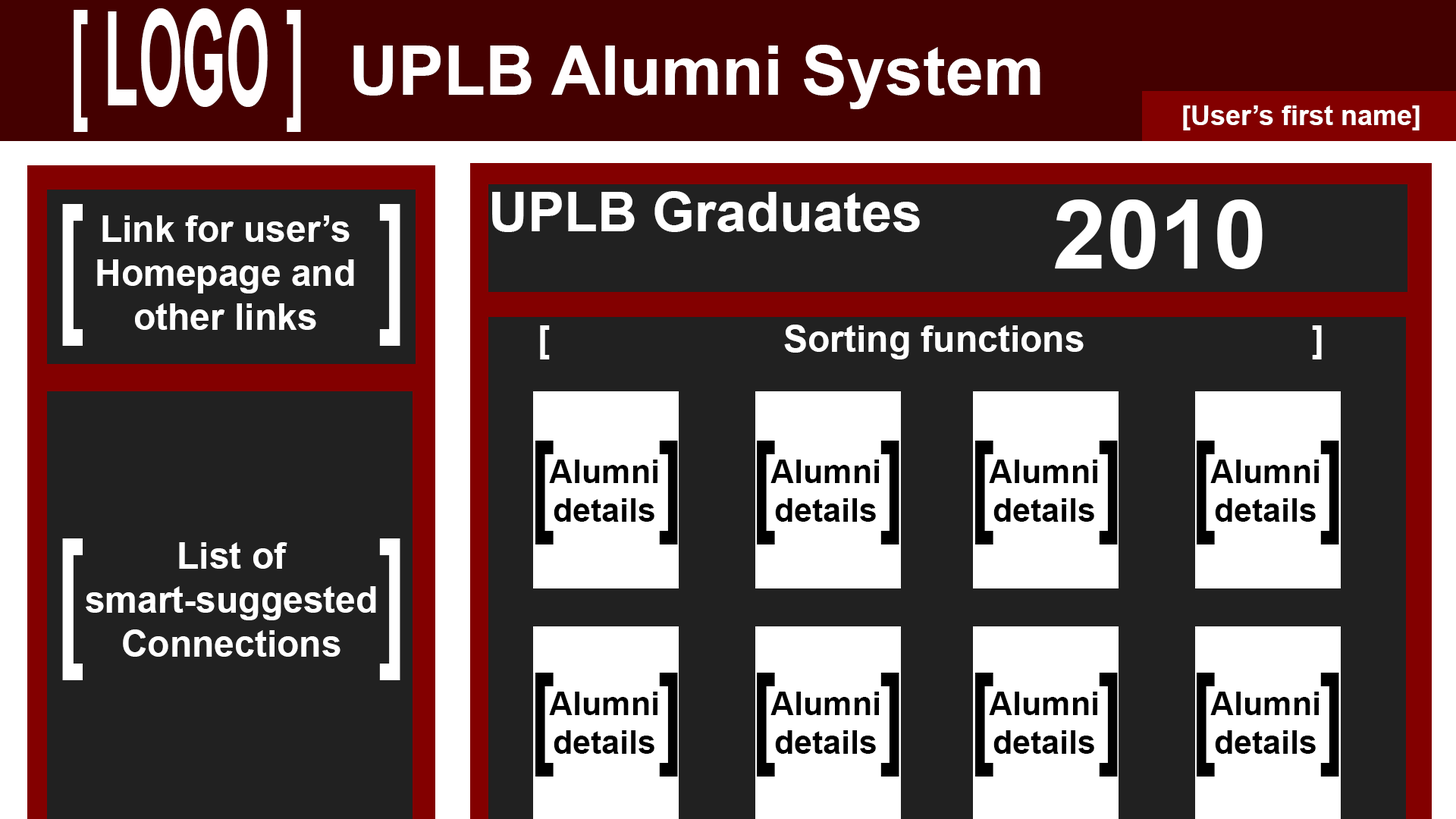
<style>
.page{position:relative;width:1456px;height:819px;background:#212121}
.page>*{position:absolute;margin:0}
.t1{font:132.9px "Arial-BoldMT";color:#fffefe;scale:0.42 1}
.t2{font:68.2px "Arial-BoldMT";color:#fffefe}
.t3{font:27.3px "Arial-BoldMT";color:#ffffff}
.t4{font:54.6px "Arial-BoldMT";color:#ffffff}
.t5{font:154.8px "Arial-BoldMT";color:#ffffff;scale:0.53 1}
.t6{font:96.3px "Arial-BoldMT";color:#ffffff}
.t7{font:36.4px "Arial-BoldMT";color:#ffffff}
.t8{font:112.8px "Arial-BoldMT";color:#000000;scale:0.66 1}
.t9{font:32.6px "Arial-BoldMT";color:#000000}
</style>
<div class="page">
<p class="t1" style="left:74px;top:8px;width:227px;height:124px">[ LOGO ]</p>
<p class="t2" style="left:353px;top:45px;width:687px;height:64px">UPLB Alumni System</p>
<p class="t3" style="left:1183px;top:105px;width:237px;height:25px">[User’s first name]</p>
<p class="t4" style="left:492px;top:191px;width:428px;height:41px">UPLB Graduates</p>
<p class="t5" style="left:62px;top:204px;width:338px;height:142px">[             ]</p>
<p class="t6" style="left:1055px;top:199px;width:208px;height:70px">2010</p>
<p class="t7" style="left:97px;top:215px;width:257px;height:115px;text-align:center">Link for user’s Homepage and other links</p>
<p class="t7" style="left:540px;top:325px;width:782px;height:34px">[         Sorting functions         ]</p>
<p class="t8" style="left:535px;top:441px;width:143px;height:103px">[     ]</p>
<p class="t8" style="left:757px;top:441px;width:142px;height:103px">[     ]</p>
<p class="t8" style="left:975px;top:441px;width:143px;height:103px">[     ]</p>
<p class="t8" style="left:1197px;top:441px;width:142px;height:103px">[     ]</p>
<p class="t9" style="left:549px;top:460px;width:108px;height:62px;text-align:center">Alumni details</p>
<p class="t9" style="left:770px;top:460px;width:109px;height:62px;text-align:center">Alumni details</p>
<p class="t9" style="left:989px;top:460px;width:108px;height:62px;text-align:center">Alumni details</p>
<p class="t9" style="left:1210px;top:460px;width:109px;height:62px;text-align:center">Alumni details</p>
<p class="t5" style="left:62px;top:538px;width:338px;height:142px">[             ]</p>
<p class="t7" style="left:86px;top:542px;width:290px;height:115px;text-align:center">List of<br>smart-suggested Connections</p>
<p class="t8" style="left:535px;top:673px;width:143px;height:104px">[     ]</p>
<p class="t8" style="left:757px;top:673px;width:142px;height:104px">[     ]</p>
<p class="t8" style="left:975px;top:673px;width:143px;height:104px">[     ]</p>
<p class="t8" style="left:1197px;top:673px;width:142px;height:104px">[     ]</p>
<p class="t9" style="left:549px;top:692px;width:108px;height:62px;text-align:center">Alumni details</p>
<p class="t9" style="left:770px;top:692px;width:109px;height:62px;text-align:center">Alumni details</p>
<p class="t9" style="left:989px;top:692px;width:108px;height:62px;text-align:center">Alumni details</p>
<p class="t9" style="left:1210px;top:692px;width:109px;height:62px;text-align:center">Alumni details</p>
</div>
